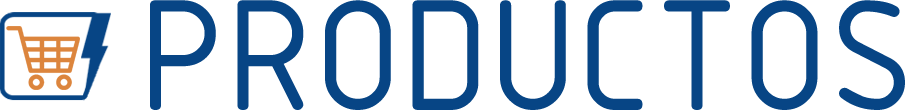
<style>
.page{position:relative;width:905px;height:110px;background:#ffffff}
.page>*{position:absolute;margin:0}
.t1{font:169.7px "ISOCPEUR";color:#074585}
</style>
<div class="page">
<p class="t1" style="left:150px;top:0px;width:755px;height:110px">PRODUCTOS</p>
</div>
